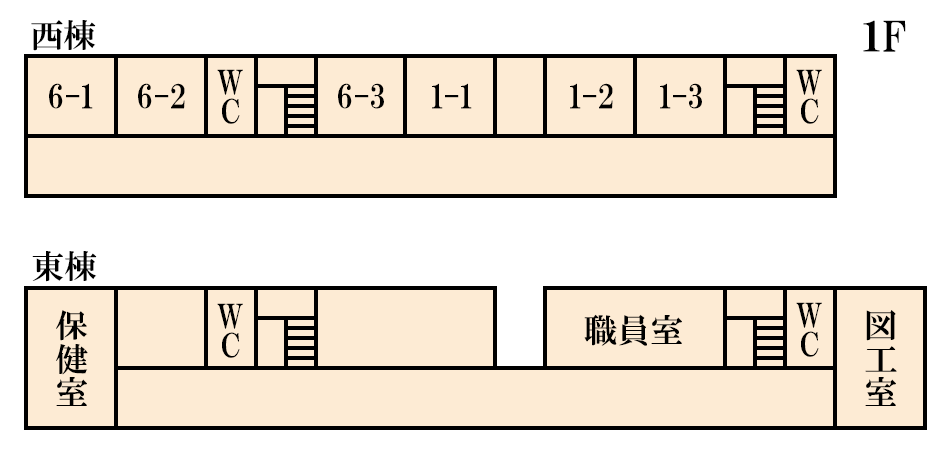
<style>
.page{position:relative;width:950px;height:450px;background:#fdebd4}
.page>*{position:absolute;margin:0}
.t1{font:33.3px "HGPMinchoE";color:#000000}
.t2{font:41.7px "HGPMinchoE";color:#000000}
.t3{font:33.3px/29.2px "HGPMinchoE";color:#000000}
.t4{font:33.3px/33.3px "HGPMinchoE";color:#000000}
</style>
<div class="page">
<p class="t1" style="left:31px;top:20px;width:65px;height:31px">西棟</p>
<p class="t2" style="left:863px;top:20px;width:43px;height:32px">１F</p>
<p class="t3" style="left:217px;top:69px;width:26px;height:55px;text-align:center">W<br>C</p>
<p class="t3" style="left:796px;top:69px;width:26px;height:55px;text-align:center">W<br>C</p>
<p class="t1" style="left:49px;top:83px;width:44px;height:26px">6-1</p>
<p class="t1" style="left:138px;top:83px;width:47px;height:26px">6-2</p>
<p class="t1" style="left:338px;top:83px;width:46px;height:26px">6-3</p>
<p class="t1" style="left:432px;top:83px;width:40px;height:26px">1-1</p>
<p class="t1" style="left:570px;top:83px;width:43px;height:26px">1-2</p>
<p class="t1" style="left:660px;top:83px;width:42px;height:26px">1-3</p>
<p class="t1" style="left:32px;top:251px;width:65px;height:31px">東棟</p>
<p class="t3" style="left:217px;top:303px;width:26px;height:55px;text-align:center">W<br>C</p>
<p class="t3" style="left:796px;top:302px;width:26px;height:55px;text-align:center">W<br>C</p>
<p class="t4" style="left:56px;top:310px;width:32px;height:96px;text-align:center">保<br>健<br>室</p>
<p class="t1" style="left:584px;top:314px;width:98px;height:32px">職員室</p>
<p class="t4" style="left:865px;top:310px;width:32px;height:96px;text-align:center">図<br>工<br>室</p>
</div>
